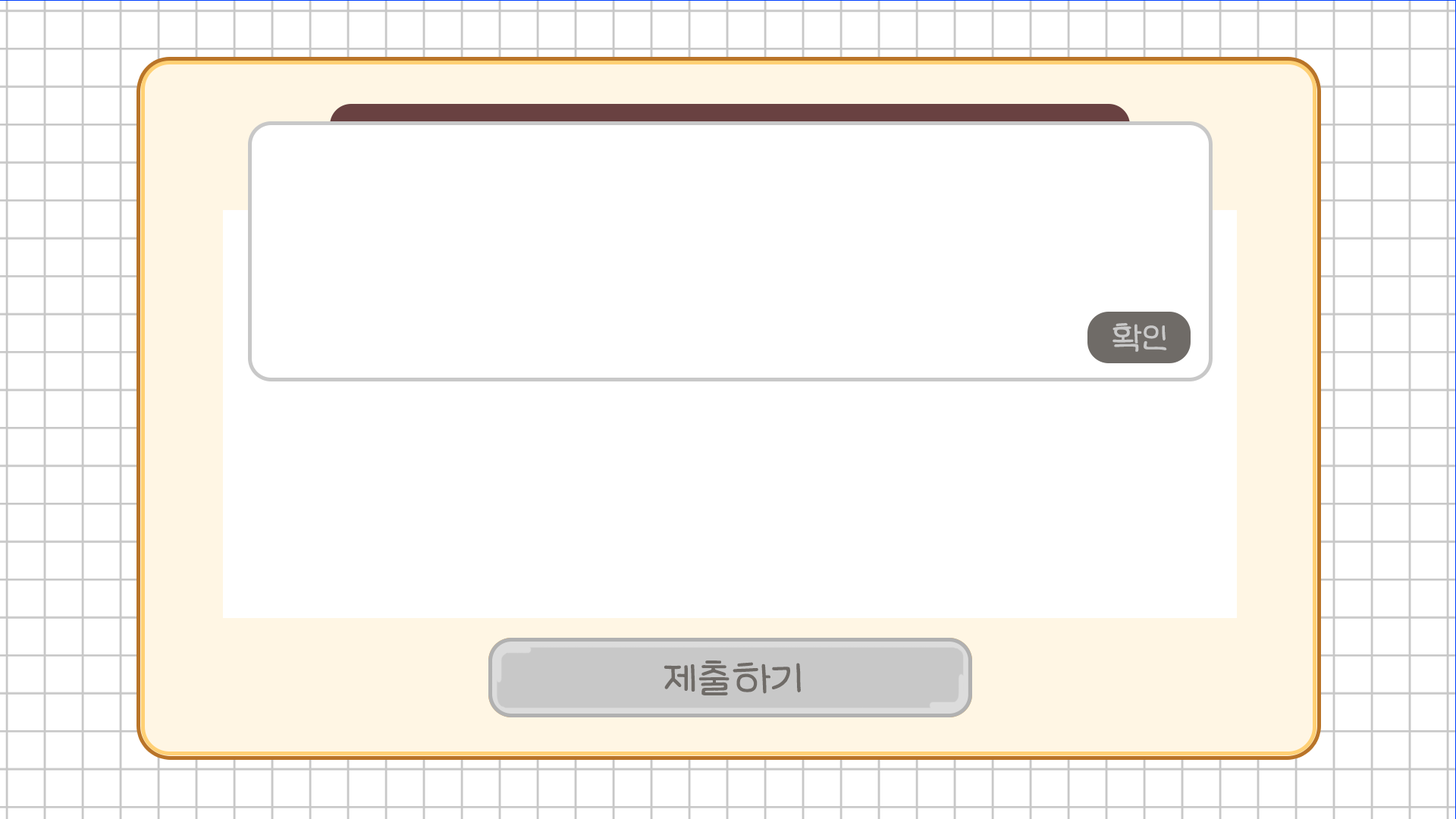
<style>
.page{position:relative;width:1456px;height:819px;background:#ffffff}
.page>*{position:absolute;margin:0}
.t1{font:36.4px "LeeSeoyun";color:#c8c8c8}
.t2{font:45.5px "LeeSeoyun";color:#6f6b67}
</style>
<div class="page">
<p class="t1" style="left:1112px;top:323px;width:55px;height:29px">확인</p>
<p class="t2" style="left:664px;top:660px;width:137px;height:35px">제출하기</p>
<p class="t2" style="left:664px;top:660px;width:137px;height:35px">제출하기</p>
</div>
